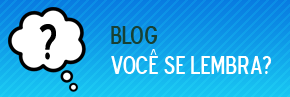
<style>
.page{position:relative;width:290px;height:97px}
.page>*{position:absolute;margin:0}
.t1{font:49.8px "BlueHighwayDType";color:#000000}
.t2{font:25px "BlueHighwayDType";color:#ffffff}
.t3{font:25px "BlueHighwayDType";color:#174134}
</style>
<div class="page">
<p class="t1" style="left:39px;top:24px;width:17px;height:36px;rotate:-2deg">?</p>
<p class="t2" style="left:111px;top:26px;width:160px;height:48px;text-align:justify"><span class="t3">blog <br></span>você se lembra?</p>
</div>
